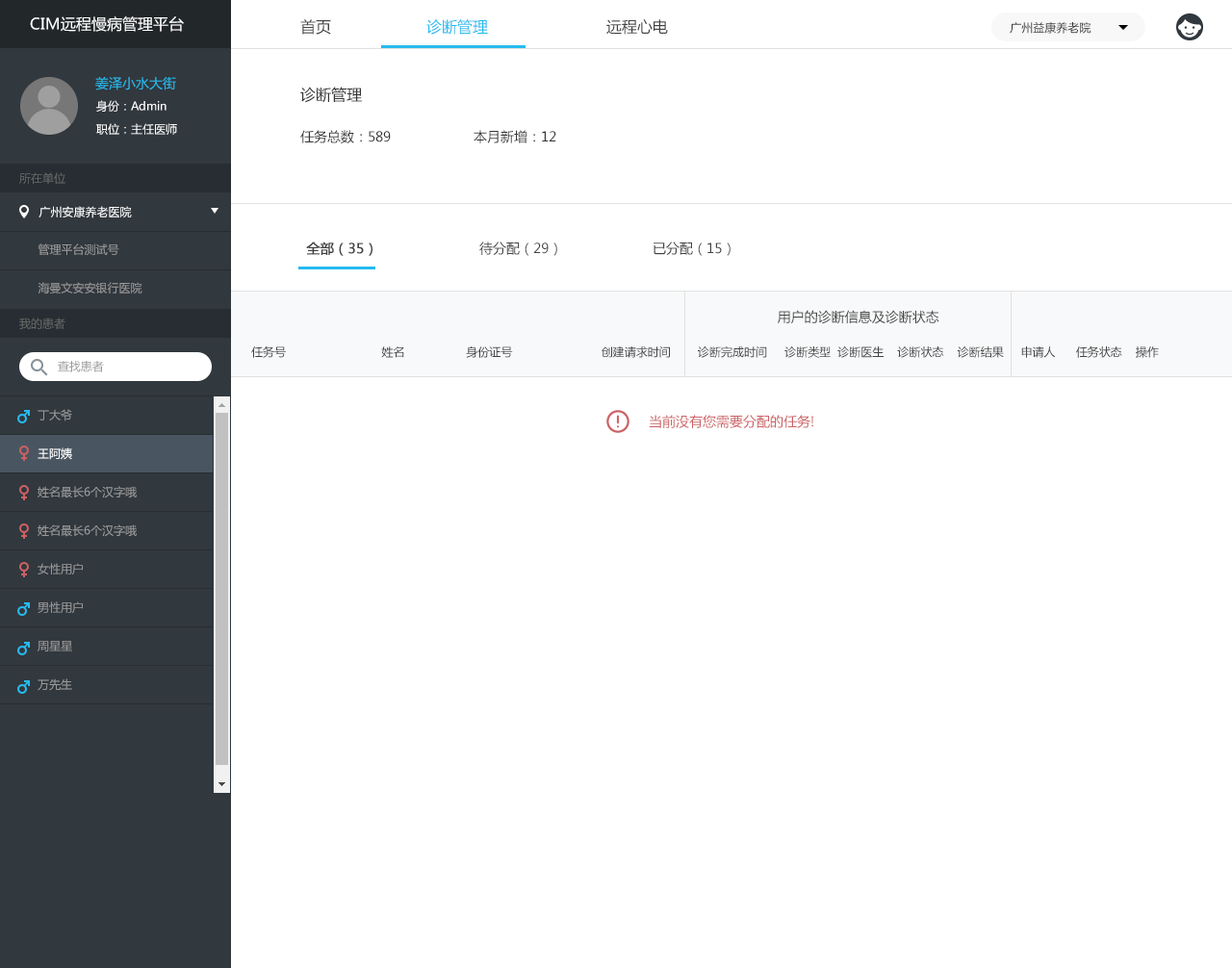
<style>
.page{position:relative;width:1232px;height:968px;background:#ffffff}
.page>*{position:absolute;margin:0}
.t1{font:15.4px "MicrosoftYaHei";color:#ffffff}
.t2{font:15.4px "MicrosoftYaHei";color:#434343}
.t3{font:15.4px "MicrosoftYaHei";color:#26bbef}
.t4{font:11.5px "MicrosoftYaHei";color:#333333}
.t5{font:13.5px "MicrosoftYaHei";color:#26bbef}
.t6{font:15.4px "MicrosoftYaHei";color:#333333}
.t7{font:11.5px "MicrosoftYaHei";color:#ffffff}
.t8{font:13.5px "MicrosoftYaHei";color:#333333}
.t9{font:11.5px "MicrosoftYaHei";color:#666666}
.t10{font:11.5px "MicrosoftYaHei";color:#999999}
.t11{font:13.5px "MicrosoftYaHei";color:#434343}
.t12{font:13.5px "MicrosoftYaHei";color:#434343;font-weight:bold}
.t13{font:11.5px "MicrosoftYaHei";color:#434343}
.t14{font:11.5px/19.2px "MicrosoftYaHei";color:#999999}
.t15{font:11.5px/19.2px "MicrosoftYaHei";color:#ffffff}
.t16{font:13.5px "MicrosoftYaHei";color:#cc6063}
</style>
<div class="page">
<p class="t1" style="left:30px;top:16px;width:154px;height:16px">CIM远程慢病管理平台</p>
<p class="t2" style="left:300px;top:19px;width:31px;height:16px">首页</p>
<p class="t3" style="left:426px;top:19px;width:62px;height:16px">诊断管理</p>
<p class="t2" style="left:606px;top:19px;width:62px;height:16px">远程心电</p>
<p class="t4" style="left:1009px;top:22px;width:82px;height:12px">广州益康养老院</p>
<p class="t5" style="left:95px;top:76px;width:81px;height:14px">姜泽小水大街</p>
<p class="t6" style="left:300px;top:87px;width:62px;height:16px">诊断管理</p>
<p class="t7" style="left:96px;top:100px;width:70px;height:12px">身份：Admin</p>
<p class="t7" style="left:96px;top:123px;width:81px;height:12px">职位：主任医师</p>
<p class="t8" style="left:300px;top:130px;width:256px;height:13px">任务总数：589   本月新增：12</p>
<p class="t9" style="left:19px;top:172px;width:46px;height:12px">所在单位</p>
<p class="t7" style="left:38px;top:206px;width:94px;height:12px">广州安康养老医院</p>
<p class="t10" style="left:38px;top:243px;width:81px;height:13px">管理平台测试号</p>
<p class="t11" style="left:306px;top:242px;width:424px;height:14px"><span class="t12">全部（35）</span>   待分配（29）   已分配（15）</p>
<p class="t10" style="left:38px;top:282px;width:104px;height:12px">海曼文安安银行医院</p>
<p class="t9" style="left:19px;top:318px;width:46px;height:11px">我的患者</p>
<p class="t11" style="left:778px;top:310px;width:161px;height:14px">用户的诊断信息及诊断状态</p>
<p class="t13" style="left:251px;top:345px;width:908px;height:13px">任务号                            姓名                  身份证号                          创建请求时间        诊断完成时间     诊断类型  诊断医生    诊断状态    诊断结果     申请人      任务状态    操作</p>
<p class="t10" style="left:58px;top:361px;width:46px;height:11px">查找患者</p>
<p class="t14" style="left:38px;top:409px;width:99px;height:282px">丁大爷<br><br><span class="t15">王阿姨<br></span><br>姓名最长6个汉字哦<br><br>姓名最长6个汉字哦<br><br>女性用户<br><br>男性用户<br><br>周星星<br><br>万先生<br><br>男女图表请区分<br><br>男性用户<br><br>男性用户<br><br>女性用户<br><br>工程师</p>
<p class="t16" style="left:649px;top:415px;width:164px;height:13px">当前没有您需要分配的任务!</p>
</div>
